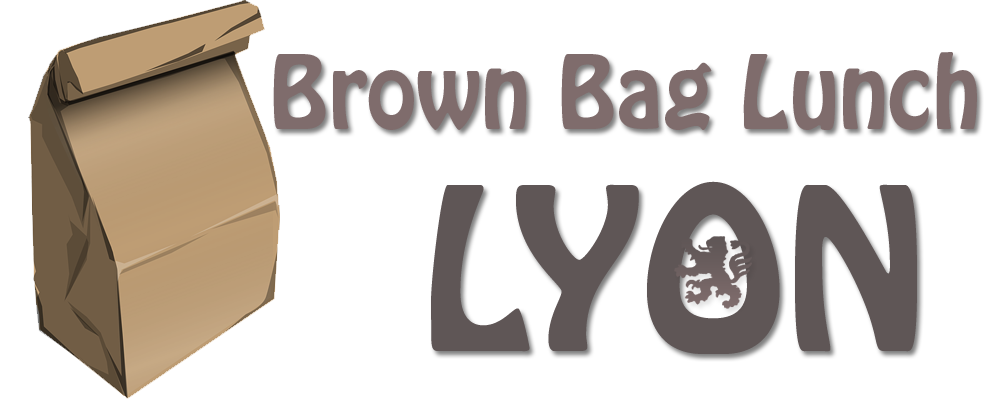
<style>
.page{position:relative;width:1000px;height:400px;background:#ffffff}
.page>*{position:absolute;margin:0}
.t1{font:90px "HoboStd";color:#7f6c6c}
.t2{font:200px "HoboStd";color:#5f5656}
</style>
<div class="page">
<p class="t1" style="left:273px;top:52px;width:704px;height:78px">Brown Bag Lunch</p>
<p class="t2" style="left:431px;top:181px;width:486px;height:173px">LYON</p>
</div>
